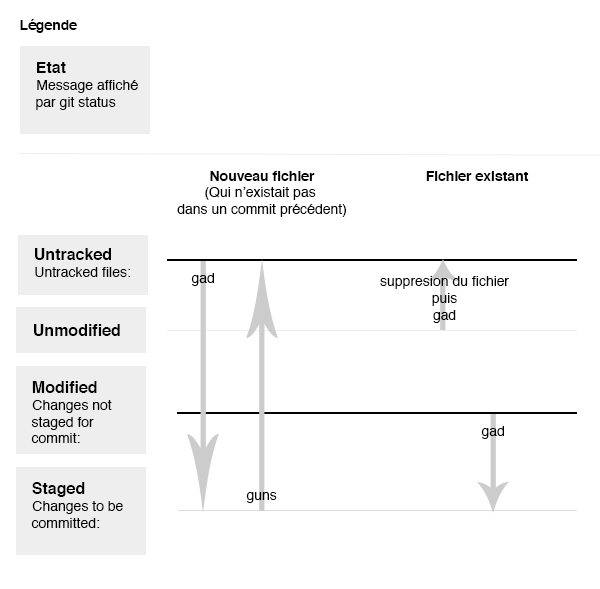
<style>
.page{position:relative;width:600px;height:589px;background:#ffffff}
.page>*{position:absolute;margin:0}
.t1{font:14px "Helvetica-Bold";color:#000000}
.t2{font:14px "Helvetica";color:#000000}
.t3{font:16px "Helvetica-Bold";color:#000000}
</style>
<div class="page">
<p class="t1" style="left:20px;top:19px;width:57px;height:14px">Légende</p>
<p class="t2" style="left:36px;top:62px;width:102px;height:48px"><span class="t3">Etat<br></span>Message affiché <br>par git status</p>
<p class="t2" style="left:177px;top:171px;width:169px;height:46px;text-align:center"><span class="t1">Nouveau fichier<br></span>(Qui n’existait pas <br>dans un commit précédent)</p>
<p class="t1" style="left:426px;top:171px;width:103px;height:10px">Fichier existant</p>
<p class="t2" style="left:35px;top:248px;width:96px;height:29px"><span class="t3">Untracked<br></span>Untracked files:</p>
<p class="t2" style="left:191px;top:273px;width:23px;height:13px">gad</p>
<p class="t2" style="left:380px;top:276px;width:129px;height:47px;text-align:center">suppresion du fichier<br>puis<br>gad</p>
<p class="t3" style="left:34px;top:324px;width:86px;height:12px">Unmodified</p>
<p class="t2" style="left:31px;top:381px;width:81px;height:62px"><span class="t3">Modified<br></span>Changes not<br>staged for<br>commit:</p>
<p class="t2" style="left:481px;top:426px;width:23px;height:13px">gad</p>
<p class="t2" style="left:31px;top:482px;width:92px;height:46px"><span class="t3">Staged<br></span>Changes to be<br>committed:</p>
<p class="t2" style="left:246px;top:492px;width:31px;height:11px">guns</p>
</div>
